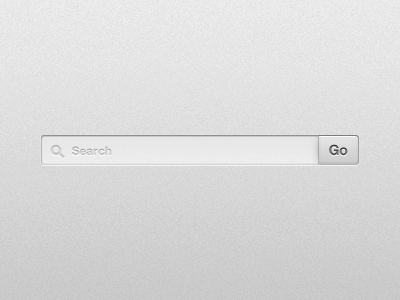
<style>
.page{position:relative;width:400px;height:300px}
.page>*{position:absolute;margin:0}
.t1{font:12px "HelveticaNeueLTCom-Bd";color:#c6c6c6}
.t2{font:14px "HelveticaNeueLTCom-Bd"}
</style>
<div class="page">
<p class="t1" style="left:72px;top:146px;width:40px;height:9px">Search</p>
<p class="t2" style="left:329px;top:144px;width:19px;height:12px">Go</p>
</div>
